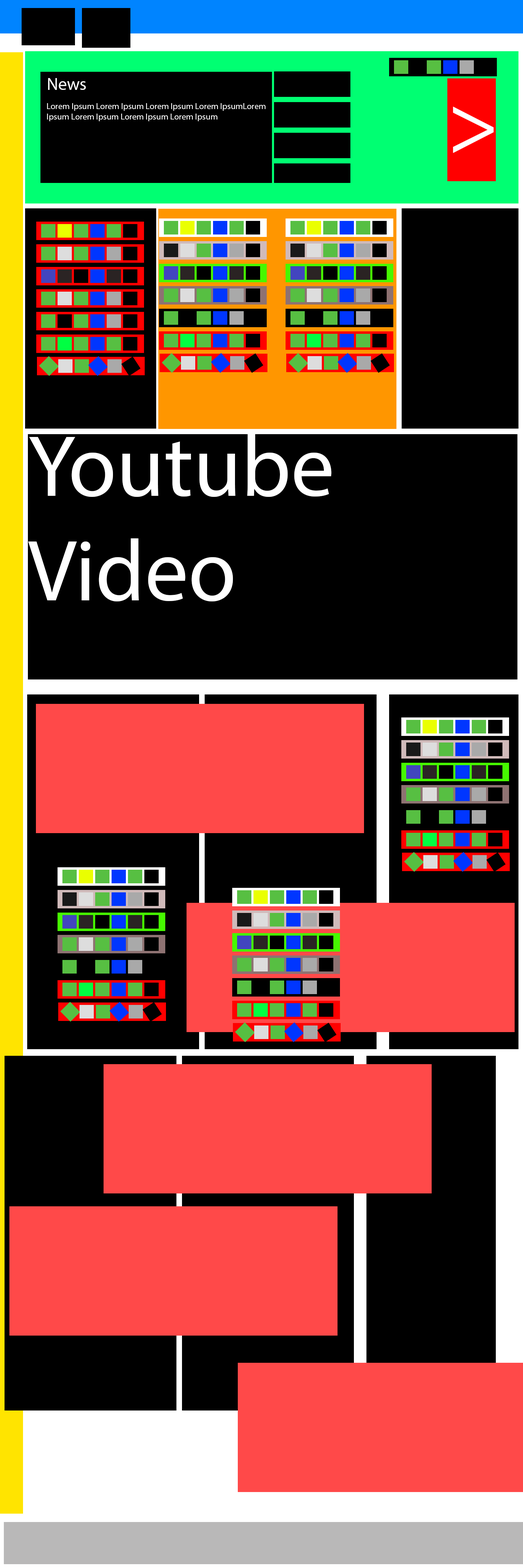
<style>
.page{position:relative;width:523px;height:1568px;background:#000000}
.page>*{position:absolute;margin:0}
.t1{font:17.4px "MyriadPro-Regular";color:#ffffff}
.t2{font:8.7px "MyriadPro-Regular";color:#ffffff}
.t3{font:87.1px "MyriadPro-Regular";color:#ffffff}
</style>
<div class="page">
<p class="t1" style="left:48px;top:78px;width:38px;height:12px">News</p>
<p class="t2" style="left:47px;top:103px;width:219px;height:18px">Lorem Ipsum Lorem Ipsum Lorem Ipsum Lorem IpsumLorem <br>Ipsum Lorem Ipsum Lorem Ipsum Lorem Ipsum</p>
<p class="t3" style="left:453px;top:107px;width:40px;height:46px">&gt;</p>
<p class="t3" style="left:28px;top:434px;width:303px;height:167px">Youtube Video</p>
</div>
